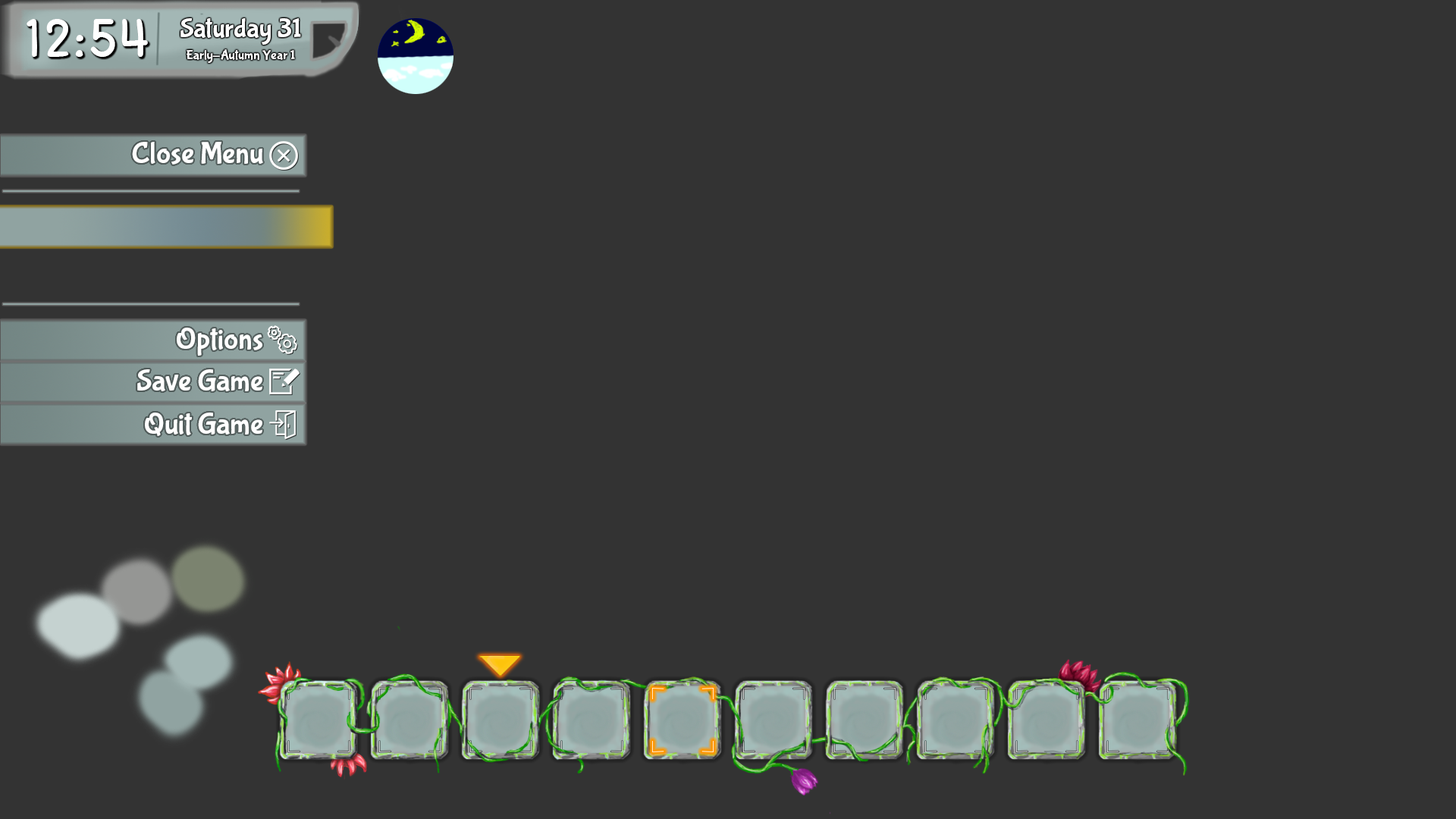
<style>
.page{position:relative;width:1456px;height:819px;background:#333333}
.page>*{position:absolute;margin:0}
.t1{font:54.6px "SFCartoonistHand-Bold";color:#ffffff}
.t2{font:27.3px "BubblegumSans-Regular";color:#ffffff}
.t3{font:13.6px "BubblegumSans-Regular";color:#ffffff}
.t4{font:30.3px "BubblegumSans-Regular";color:#ffffff}
</style>
<div class="page">
<p class="t1" style="left:27px;top:19px;width:121px;height:38px">12:54</p>
<p class="t2" style="left:180px;top:18px;width:121px;height:27px">Saturday 31</p>
<p class="t3" style="left:187px;top:49px;width:108px;height:14px">Early-Autumn Year 1</p>
<p class="t4" style="left:132px;top:142px;width:131px;height:23px">Close Menu</p>
<p class="t4" style="left:177px;top:328px;width:85px;height:28px">Options</p>
<p class="t4" style="left:137px;top:369px;width:125px;height:22px">Save Game</p>
<p class="t4" style="left:145px;top:413px;width:117px;height:23px">Quit Game</p>
</div>
